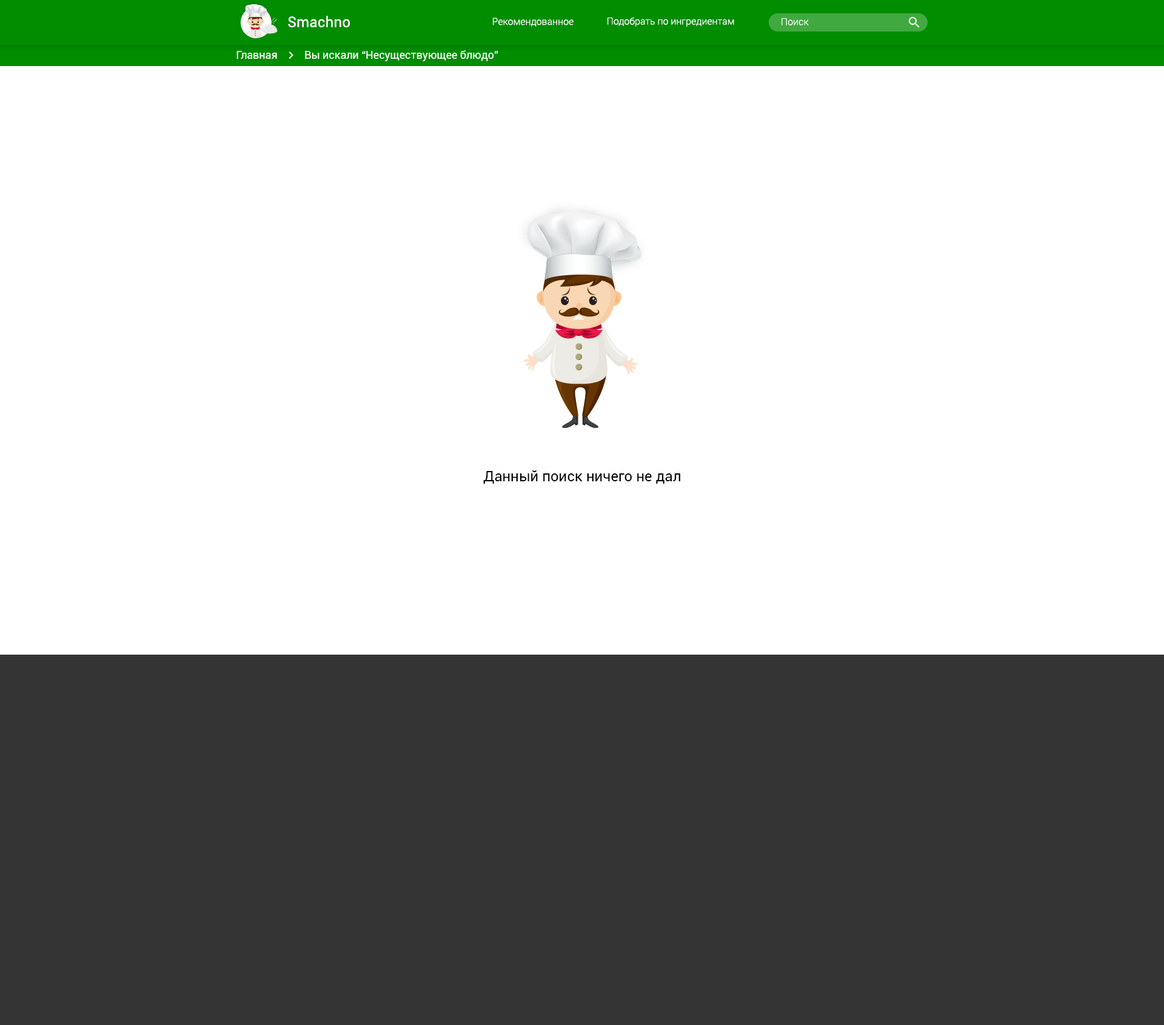
<style>
.page{position:relative;width:1164px;height:1025px;background:#ffffff}
.page>*{position:absolute;margin:0}
.t1{font:14.5px "Roboto-Regular";letter-spacing:0.01em;color:#ffffff}
.t2{font:9.7px "Roboto-Light";color:#ffffff}
.t3{font:10.9px "Roboto-Regular";color:#ffffff}
.t4{font:14.5px "Roboto-Regular";color:#000000}
</style>
<div class="page">
<p class="t1" style="left:288px;top:16px;width:62px;height:11px">Smachno</p>
<p class="t2" style="left:493px;top:18px;width:80px;height:9px">Рекомендованное</p>
<p class="t2" style="left:607px;top:17px;width:127px;height:10px">Подобрать по ингредиентам</p>
<p class="t2" style="left:781px;top:18px;width:27px;height:7px">Поиск</p>
<p class="t3" style="left:236px;top:51px;width:41px;height:8px">Главная</p>
<p class="t3" style="left:305px;top:50px;width:193px;height:11px">Вы искали “Несуществующее блюдо”</p>
<p class="t4" style="left:483px;top:470px;width:197px;height:14px">Данный поиск ничего не дал</p>
</div>
